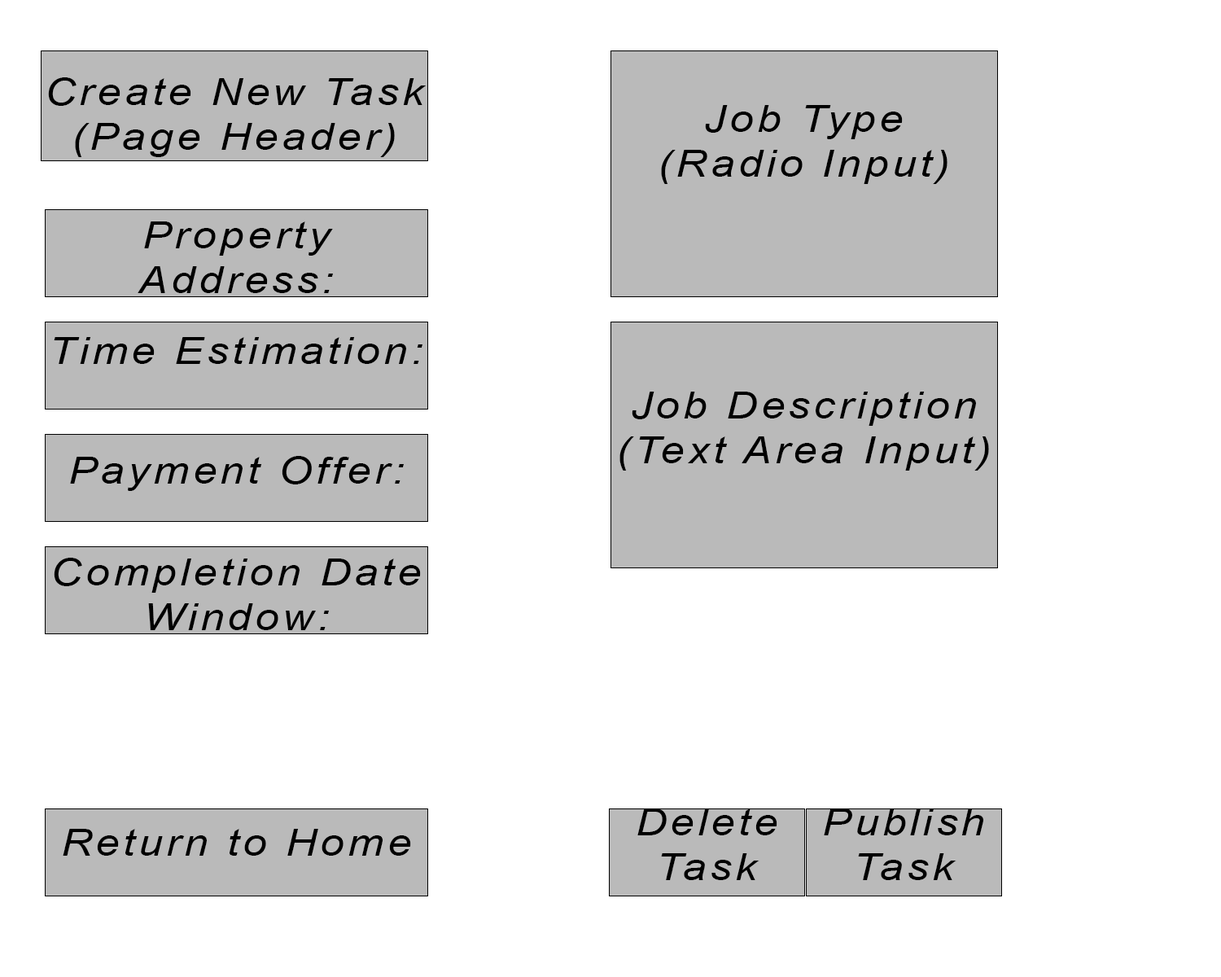
<style>
.page{position:relative;width:1221px;height:977px;background:#ffffff}
.page>*{position:absolute;margin:0}
.t1{font:37.3px "Arial-ItalicMT";letter-spacing:0.08em;color:#000000;scale:1.16 1}
</style>
<div class="page">
<p class="t1" style="left:48px;top:77px;width:378px;height:80px;text-align:center">Create New Task<br>(Page Header)</p>
<p class="t1" style="left:661px;top:105px;width:286px;height:79px;text-align:center">Job Type<br>(Radio Input)</p>
<p class="t1" style="left:138px;top:221px;width:195px;height:72px;text-align:center">Property Address:</p>
<p class="t1" style="left:54px;top:337px;width:368px;height:27px">Time Estimation:</p>
<p class="t1" style="left:619px;top:391px;width:370px;height:79px;text-align:center">Job Description<br>(Text Area Input)</p>
<p class="t1" style="left:70px;top:456px;width:334px;height:35px">Payment Offer:</p>
<p class="t1" style="left:54px;top:558px;width:367px;height:72px;text-align:center">Completion Date Window:</p>
<p class="t1" style="left:637px;top:808px;width:140px;height:72px;text-align:center">Delete Task</p>
<p class="t1" style="left:824px;top:808px;width:159px;height:72px;text-align:center">Publish Task</p>
<p class="t1" style="left:63px;top:829px;width:348px;height:26px">Return to Home</p>
</div>
